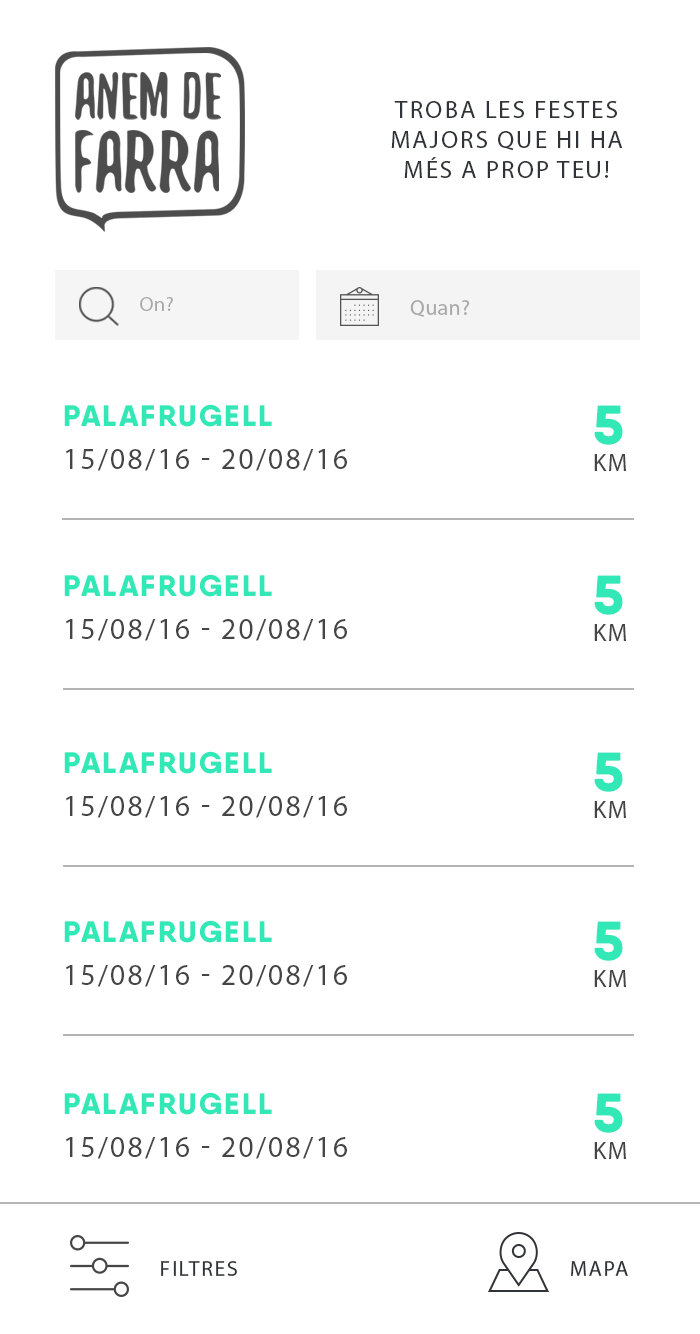
<style>
.page{position:relative;width:700px;height:1334px;background:#ffffff}
.page>*{position:absolute;margin:0}
.t1{font:25.2px/29.8px "MyriadPro-Regular";letter-spacing:0.075em;color:#303338;text-transform:uppercase}
.t2{font:19.8px "MyriadPro-Regular";letter-spacing:0.025em;color:#a8a8a8}
.t3{font:21.6px "MyriadPro-Regular";letter-spacing:0.025em;color:#a8a8a8}
.t4{font:29.7px "QanelasSoftDEMO-ExtraBold";letter-spacing:0.075em;color:#32e8b7;text-transform:uppercase}
.t5{font:55.2px "QanelasSoftDEMO-ExtraBold";letter-spacing:0.075em;color:#32e8b7;text-transform:uppercase}
.t6{font:29.7px "MyriadPro-Regular";letter-spacing:0.075em;color:#454545;text-transform:uppercase}
.t7{font:24.6px "MyriadPro-Regular";letter-spacing:0.075em;color:#454545}
.t8{font:21.7px "MyriadPro-Regular";letter-spacing:0.075em;color:#303338;text-transform:uppercase}
</style>
<div class="page">
<p class="t1" style="left:391px;top:101px;width:232px;height:77px;text-align:center">troba les festes majors que hi ha més a prop teu!</p>
<p class="t2" style="left:140px;top:297px;width:33px;height:14px">On?</p>
<p class="t3" style="left:410px;top:300px;width:60px;height:17px">Quan?</p>
<p class="t4" style="left:64px;top:404px;width:208px;height:23px">Palafrugell</p>
<p class="t5" style="left:594px;top:405px;width:29px;height:40px">5</p>
<p class="t6" style="left:66px;top:449px;width:281px;height:22px">15/08/16 - 20/08/16</p>
<p class="t7" style="left:594px;top:454px;width:32px;height:17px">KM</p>
<p class="t4" style="left:64px;top:574px;width:208px;height:23px">Palafrugell</p>
<p class="t5" style="left:594px;top:575px;width:29px;height:40px">5</p>
<p class="t6" style="left:66px;top:619px;width:281px;height:22px">15/08/16 - 20/08/16</p>
<p class="t7" style="left:594px;top:624px;width:32px;height:17px">KM</p>
<p class="t4" style="left:64px;top:751px;width:208px;height:23px">Palafrugell</p>
<p class="t5" style="left:594px;top:752px;width:29px;height:40px">5</p>
<p class="t6" style="left:66px;top:796px;width:281px;height:22px">15/08/16 - 20/08/16</p>
<p class="t7" style="left:594px;top:801px;width:32px;height:17px">KM</p>
<p class="t4" style="left:64px;top:920px;width:208px;height:23px">Palafrugell</p>
<p class="t5" style="left:594px;top:921px;width:29px;height:40px">5</p>
<p class="t6" style="left:66px;top:965px;width:281px;height:22px">15/08/16 - 20/08/16</p>
<p class="t7" style="left:594px;top:970px;width:32px;height:17px">KM</p>
<p class="t4" style="left:64px;top:1092px;width:208px;height:23px">Palafrugell</p>
<p class="t5" style="left:594px;top:1093px;width:29px;height:40px">5</p>
<p class="t6" style="left:66px;top:1137px;width:281px;height:22px">15/08/16 - 20/08/16</p>
<p class="t7" style="left:594px;top:1142px;width:32px;height:17px">KM</p>
<p class="t8" style="left:161px;top:1261px;width:76px;height:15px">Filtres</p>
<p class="t8" style="left:570px;top:1261px;width:58px;height:15px">mapa</p>
</div>
